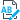
<style>
.page{position:relative;width:20px;height:20px;background:#ffffff}
.page>*{position:absolute;margin:0}
.t1{font:9px "SegoeUI-Bold";color:#00aced;scale:0.9 1}
</style>
<div class="page">
<p class="t1" style="left:1px;top:6px;width:11px;height:7px">AB</p>
</div>
